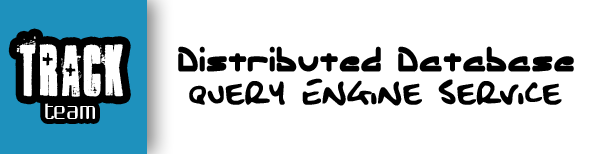
<style>
.page{position:relative;width:600px;height:154px;background:#ffffff}
.page>*{position:absolute;margin:0}
.t1{font:60px "ambulanceshotgun";letter-spacing:0.075em;color:#ffffff;scale:0.8 1}
.t2{font:34.7px "EclipticBRK";letter-spacing:0.05em;color:#000000;font-weight:bold;scale:0.8 1}
.t3{font:34.7px "FatboySlimBLTC2BRK";letter-spacing:0.05em;color:#000000;font-weight:bold;scale:0.8 1}
.t4{font:26.7px "Choktoff";letter-spacing:-0.01em;color:#ffffff;scale:0.8 1}
</style>
<div class="page">
<p class="t1" style="left:16px;top:36px;width:107px;height:61px">track</p>
<p class="t2" style="left:178px;top:46px;width:396px;height:26px">Distributed Database</p>
<p class="t3" style="left:189px;top:78px;width:373px;height:28px">Query Engine Service</p>
<p class="t4" style="left:45px;top:100px;width:50px;height:19px">team</p>
</div>
